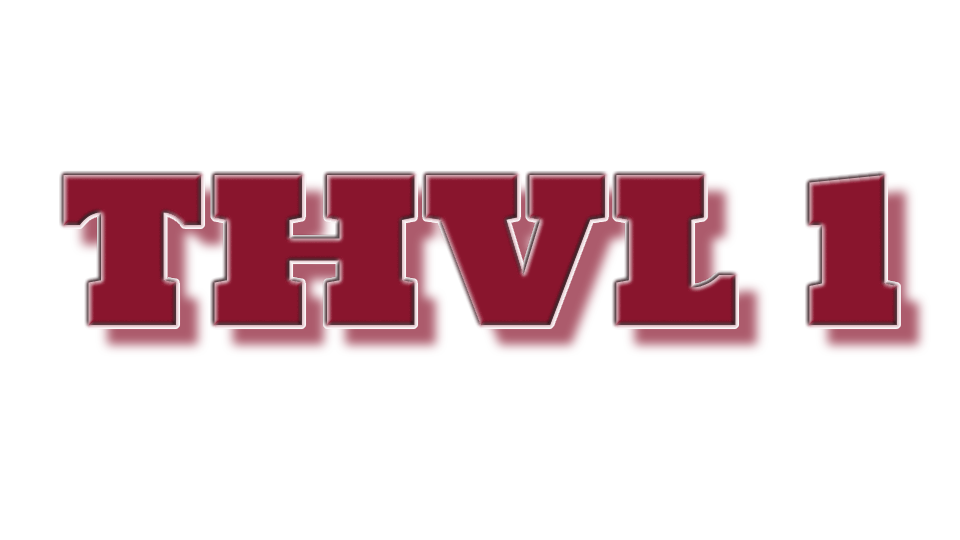
<style>
.page{position:relative;width:960px;height:540px;background:#ffffff}
.page>*{position:absolute;margin:0}
.t1{font:200px "HoltwoodOneSC";color:#89152d}
</style>
<div class="page">
<p class="t1" style="left:63px;top:175px;width:834px;height:151px">THVL 1</p>
</div>
